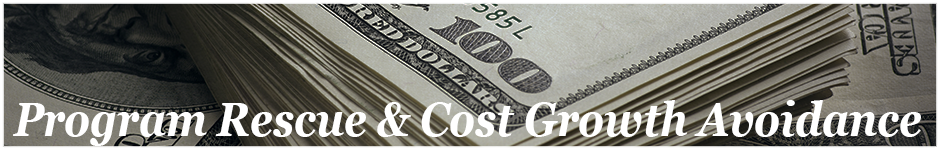
<style>
.page{position:relative;width:940px;height:150px}
.page>*{position:absolute;margin:0}
.t1{font:47px "Georgia-BoldItalic";color:#ffffff;scale:0.87 1}
</style>
<div class="page">
<p class="t1" style="left:13px;top:100px;width:908px;height:46px">Program Rescue &amp; Cost Growth Avoidance</p>
</div>
